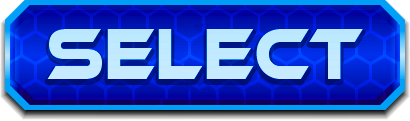
<style>
.page{position:relative;width:410px;height:121px}
.page>*{position:absolute;margin:0}
.t1{font:75px "Ethnocentric-Regular";color:#c1e9ff;scale:0.8 1}
</style>
<div class="page">
<p class="t1" style="left:47px;top:29px;width:316px;height:50px">SELECT</p>
</div>
